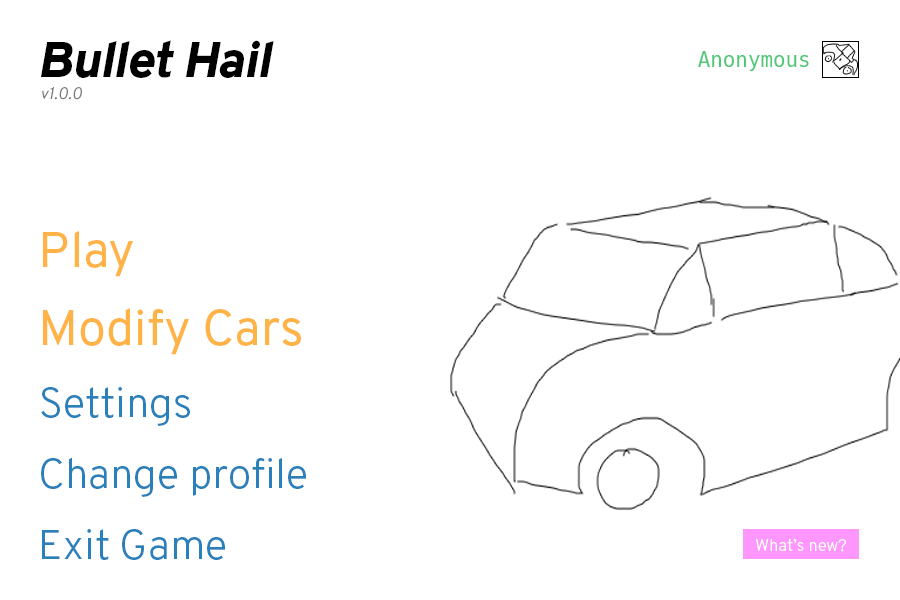
<style>
.page{position:relative;width:900px;height:600px;background:#ffffff}
.page>*{position:absolute;margin:0}
.t1{font:50px "Overpass-HeavyItalic";color:#000000}
.t2{font:20.8px "Hack-Regular";color:#50c878}
.t3{font:16.7px "Overpass-LightItalic";color:#787878}
.t4{font:50px "Overpass-Regular";color:#ffb347}
.t5{font:41.7px "Overpass-Light";color:#2980bb}
.t6{font:16.7px "Overpass-Light";color:#fffefe}
</style>
<div class="page">
<p class="t1" style="left:41px;top:40px;width:233px;height:38px">Bullet Hail</p>
<p class="t2" style="left:698px;top:51px;width:111px;height:20px">Anonymous</p>
<p class="t3" style="left:42px;top:87px;width:40px;height:13px">v1.0.0</p>
<p class="t4" style="left:43px;top:231px;width:90px;height:46px">Play</p>
<p class="t4" style="left:43px;top:308px;width:258px;height:47px">Modify Cars</p>
<p class="t5" style="left:41px;top:387px;width:149px;height:39px">Settings</p>
<p class="t5" style="left:41px;top:457px;width:265px;height:40px">Change profile</p>
<p class="t5" style="left:42px;top:529px;width:183px;height:31px">Exit Game</p>
<p class="t6" style="left:756px;top:538px;width:90px;height:14px">What’s new?</p>
</div>
